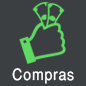
<style>
.page{position:relative;width:86px;height:86px;background:#3c3f41}
.page>*{position:absolute;margin:0}
.t1{font:15.6px "Helvetica-Normal";letter-spacing:0.06em;color:#ffffff;scale:0.89 1}
</style>
<div class="page">
<p class="t1" style="left:12px;top:68px;width:62px;height:16px">Compras</p>
</div>
